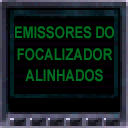
<style>
.page{position:relative;width:128px;height:128px;background:#000000}
.page>*{position:absolute;margin:0}
.t1{font:16px/21.3px "Arial-BoldMT";color:#006f22;text-transform:uppercase;scale:0.82 1}
.t2{font:16px/21.3px "Arial-BoldMT";letter-spacing:-0.02em;color:#006f22;text-transform:uppercase;scale:0.82 1}
</style>
<div class="page">
<p class="t1" style="left:15px;top:26px;width:99px;height:56px;text-align:center">emissores d<span class="t2">o<br></span>focalizador<br>alinhados</p>
</div>
